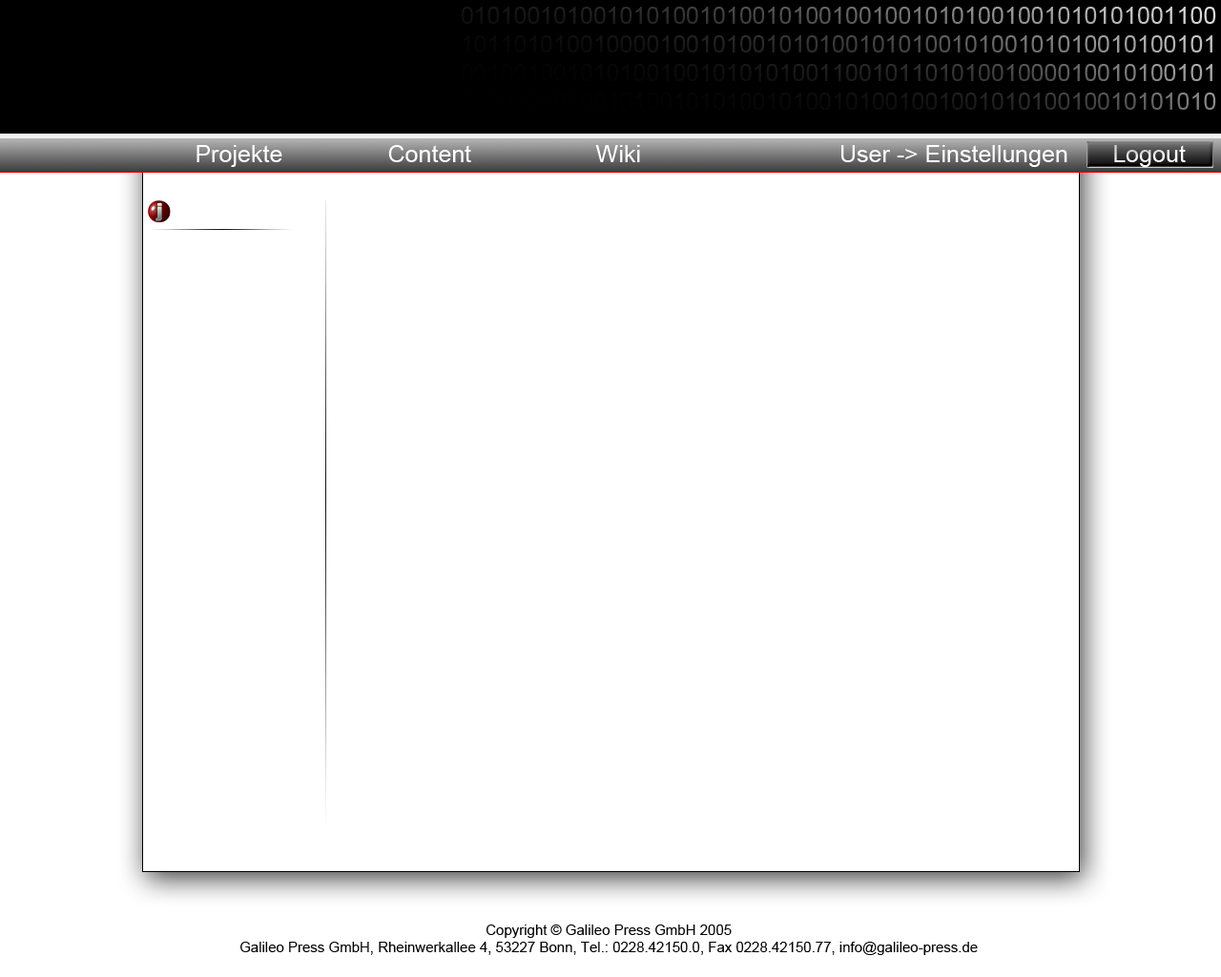
<style>
.page{position:relative;width:1221px;height:977px;background:#ffffff}
.page>*{position:absolute;margin:0}
.t1{font:23.8px "ArialMT";color:#ffffff}
.t2{font:14.3px "ArialMT";color:#000000}
</style>
<div class="page">
<p class="t1" style="left:196px;top:145px;width:86px;height:22px">Projekte</p>
<p class="t1" style="left:388px;top:145px;width:83px;height:17px">Content</p>
<p class="t1" style="left:595px;top:145px;width:45px;height:17px">Wiki</p>
<p class="t1" style="left:841px;top:145px;width:226px;height:22px">User -&gt; Einstellungen</p>
<p class="t1" style="left:1114px;top:145px;width:72px;height:22px">Logout</p>
<p class="t2" style="left:240px;top:924px;width:738px;height:31px;text-align:center">Copyright © Galileo Press GmbH 2005<br>Galileo Press GmbH, Rheinwerkallee 4, 53227 Bonn, Tel.: 0228.42150.0, Fax 0228.42150.77, info@galileo-press.de</p>
</div>
